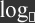
<style>
.page{position:relative;width:35px;height:23px;background:#333333}
.page>*{position:absolute;margin:0}
.t1{font:24px "TimesNewRomanPSMT";color:#ffffff;scale:0.95 1}
</style>
<div class="page">
<p class="t1" style="left:0px;top:0px;width:28px;height:23px">log</p>
</div>
